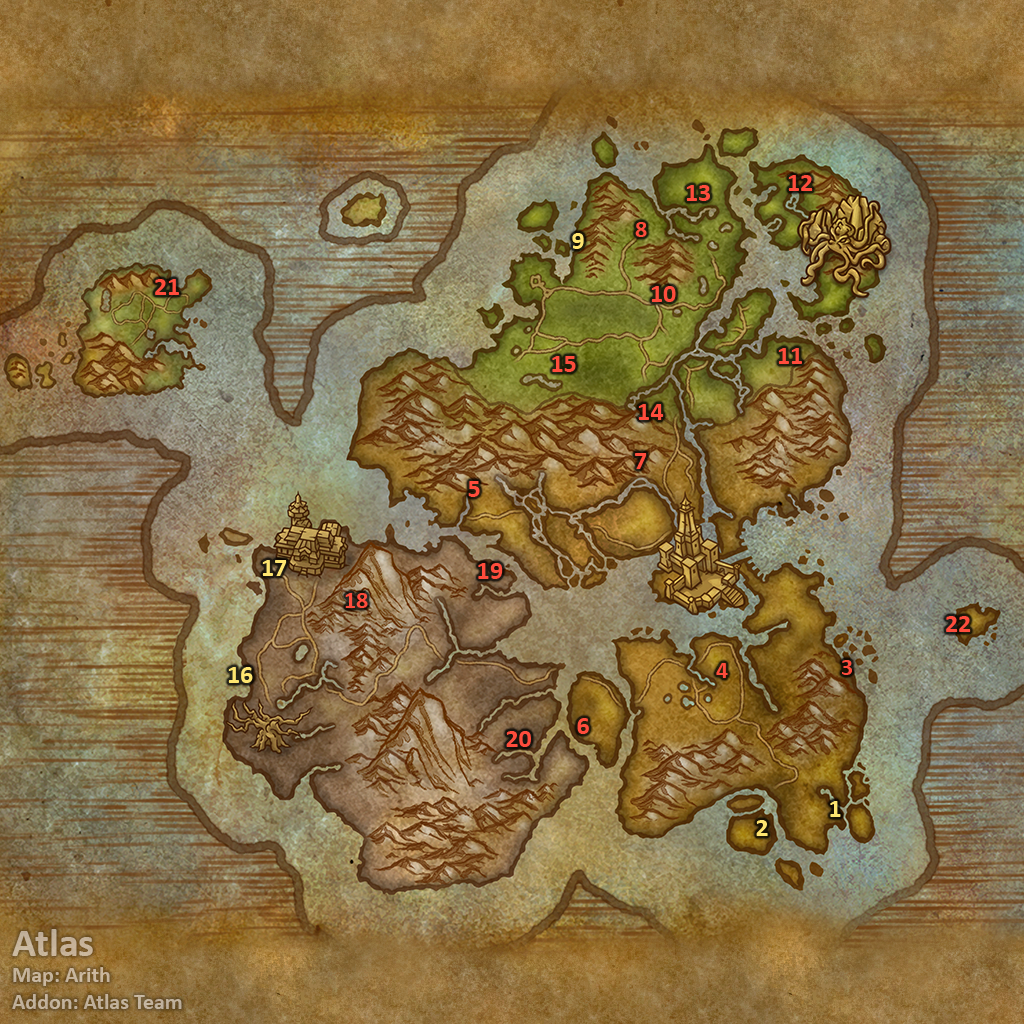
<style>
.page{position:relative;width:1024px;height:1024px}
.page>*{position:absolute;margin:0}
.t1{font:26px "Calibri-Bold";color:#ff4c3c}
.t2{font:24px "Calibri-Bold";color:#ff4c3c}
.t3{font:26px "Calibri-Bold";color:#fee570}
.t4{font:22px "Calibri-Bold";color:#c4b29b}
.t5{font:40px "Calibri-Bold";color:#c4b29b}
</style>
<div class="page">
<p class="t1" style="left:686px;top:185px;width:24px;height:16px">13</p>
<p class="t1" style="left:788px;top:175px;width:25px;height:16px">12</p>
<p class="t2" style="left:635px;top:222px;width:12px;height:15px">8</p>
<p class="t3" style="left:572px;top:233px;width:12px;height:16px">9</p>
<p class="t1" style="left:155px;top:279px;width:24px;height:16px">21</p>
<p class="t1" style="left:651px;top:286px;width:25px;height:16px">10</p>
<p class="t1" style="left:778px;top:348px;width:24px;height:16px">11</p>
<p class="t1" style="left:552px;top:356px;width:24px;height:16px">15</p>
<p class="t1" style="left:638px;top:404px;width:26px;height:16px">14</p>
<p class="t1" style="left:635px;top:453px;width:12px;height:16px">7</p>
<p class="t1" style="left:468px;top:481px;width:12px;height:16px">5</p>
<p class="t3" style="left:262px;top:560px;width:25px;height:16px">17</p>
<p class="t1" style="left:478px;top:563px;width:25px;height:16px">19</p>
<p class="t2" style="left:345px;top:593px;width:23px;height:15px">18</p>
<p class="t1" style="left:946px;top:616px;width:25px;height:16px">22</p>
<p class="t2" style="left:716px;top:663px;width:12px;height:15px">4</p>
<p class="t2" style="left:842px;top:660px;width:10px;height:15px">3</p>
<p class="t3" style="left:228px;top:667px;width:25px;height:16px">16</p>
<p class="t1" style="left:577px;top:718px;width:12px;height:16px">6</p>
<p class="t1" style="left:506px;top:731px;width:25px;height:16px">20</p>
<p class="t3" style="left:830px;top:801px;width:11px;height:16px">1</p>
<p class="t3" style="left:756px;top:820px;width:12px;height:16px">2</p>
<p class="t4" style="left:12px;top:929px;width:170px;height:80px"><span class="t5">Atlas<br></span>Map: Arith<br>Addon: Atlas Team</p>
</div>
